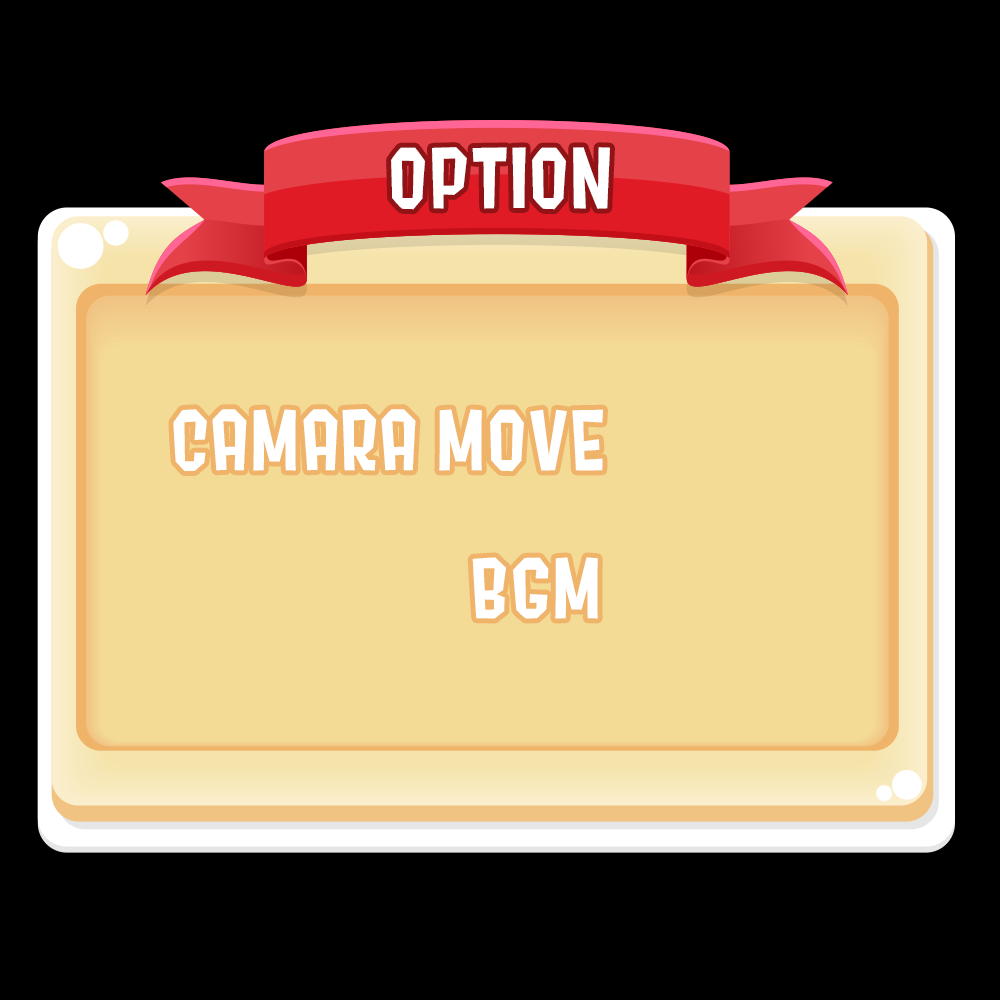
<style>
.page{position:relative;width:1000px;height:1000px;background:#000000}
.page>*{position:absolute;margin:0}
.t1{font:83.3px "Splat2K";letter-spacing:0.01em;color:#ffffff}
</style>
<div class="page">
<p class="t1" style="left:391px;top:147px;width:219px;height:63px">OPTION</p>
<p class="t1" style="left:173px;top:409px;width:430px;height:63px">CAMARA MOVE</p>
<p class="t1" style="left:472px;top:557px;width:126px;height:62px">BGM</p>
</div>
